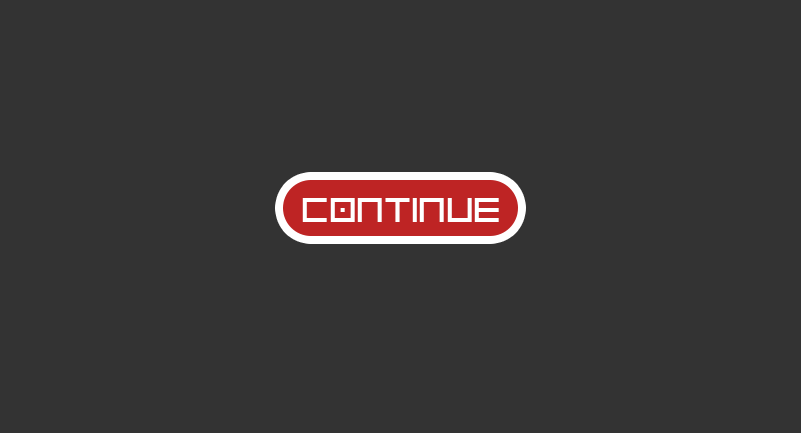
<style>
.page{position:relative;width:801px;height:433px;background:#333333}
.page>*{position:absolute;margin:0}
.t1{font:42.1px "PlatinumBeatBTN";color:#ffffff}
</style>
<div class="page">
<p class="t1" style="left:302px;top:198px;width:197px;height:24px">CONTINUE</p>
</div>
